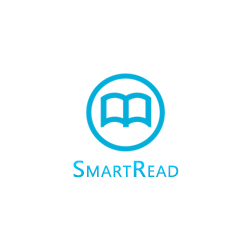
<style>
.page{position:relative;width:250px;height:250px;background:#ffffff}
.page>*{position:absolute;margin:0}
.t1{font:23px "Ebrima";letter-spacing:0.025em;color:#04aeda;font-variant:small-caps;font-weight:bold}
</style>
<div class="page">
<p class="t1" style="left:73px;top:160px;width:106px;height:18px">SmartRead</p>
</div>
